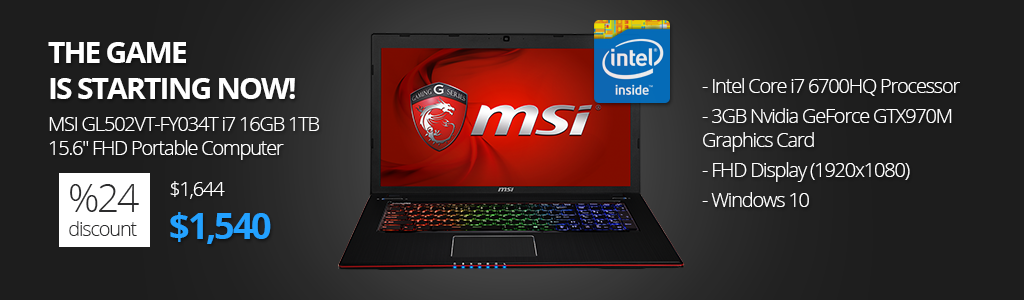
<style>
.page{position:relative;width:1024px;height:300px;background:#1d1d1d}
.page>*{position:absolute;margin:0}
.t1{font:20px/32px "OpenSans-Light";letter-spacing:-0.06em;color:#ffffff}
.t2{font:30px "OpenSans-Bold";letter-spacing:-0.06em;color:#ffffff}
.t3{font:20px "OpenSans-Light";letter-spacing:-0.06em;color:#ffffff}
.t4{font:20px/30px "OpenSans-Light";letter-spacing:-0.06em;color:#ffffff}
.t5{font:20px "OpenSans-Light";letter-spacing:-0.06em;color:#2c2c2d}
.t6{font:39px "OpenSans-Light";letter-spacing:-0.06em;color:#2c2c2d}
.t7{font:36px "OpenSans-Bold";letter-spacing:-0.06em;color:#23a1ff}
</style>
<div class="page">
<p class="t1" style="left:48px;top:42px;width:271px;height:118px"><span class="t2">THE GAME<br>IS STARTING NOW!<br></span>MSI GL502VT-FY034T i7 16GB 1TB<br><span class="t3">15.6" FHD Portable Computer</span></p>
<p class="t4" style="left:702px;top:78px;width:258px;height:129px"><span class="t3">- Intel Core i7 6700HQ Processor<br></span>- 3GB Nvidia GeForce GTX970M<br><span class="t3">Graphics Card<br></span>- FHD Display (1920x1080)<br>- Windows 10</p>
<p class="t5" style="left:69px;top:184px;width:70px;height:52px"><span class="t6">%24<br></span>discount</p>
<p class="t3" style="left:170px;top:181px;width:101px;height:63px">$1,644<br><span class="t7">$1,540</span></p>
</div>
